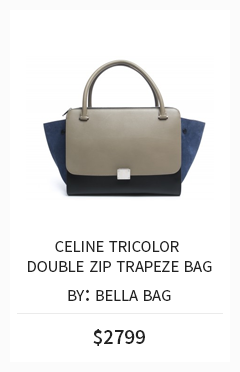
<style>
.page{position:relative;width:240px;height:372px;background:#ffffff}
.page>*{position:absolute;margin:0}
.t1{font:23.6px/20.8px "SourceSansPro-Regular";color:#232323;font-variant:small-caps}
.t2{font:23.6px "SourceSansPro-Regular";color:#232323;font-variant:small-caps}
.t3{font:20.6px "SourceSansPro-Semibold";color:#232323}
</style>
<div class="page">
<p class="t1" style="left:28px;top:241px;width:184px;height:31px;text-align:center">celine tricolor <br>double zip trapeze bag</p>
<p class="t2" style="left:68px;top:289px;width:103px;height:12px">by: bella bag</p>
<p class="t3" style="left:93px;top:329px;width:52px;height:17px">$2799</p>
</div>
